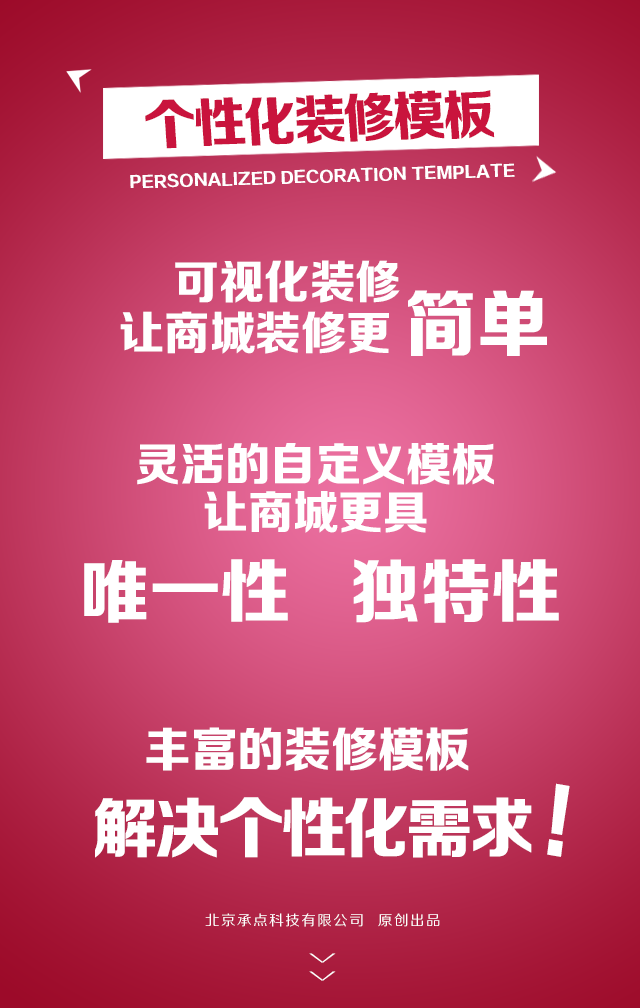
<style>
.page{position:relative;width:640px;height:1008px}
.page>*{position:absolute;margin:0}
.t1{font:53.7px "FZZDHJW--GB1-0";letter-spacing:-0.05em;color:#c9143d;text-transform:uppercase}
.t2{font:15.6px "FZZDHJW--GB1-0";letter-spacing:0.005em;color:#ffffff;text-transform:uppercase}
.t3{font:46.4px/51.5px "FZZDHJW--GB1-0";color:#ffffff;text-transform:uppercase}
.t4{font:72.8px "FZZDHJW--GB1-0";color:#ffffff;text-transform:uppercase}
.t5{font:46px/48px "FZZDHJW--GB1-0";color:#ffffff;text-transform:uppercase}
.t6{font:70.3px "FZZDHJW--GB1-0";color:#ffffff;text-transform:uppercase}
.t7{font:47.7px "FZZDHJW--GB1-0";color:#ffffff;text-transform:uppercase}
.t8{font:84.6px "FZZDHJW--GB1-0";letter-spacing:0.005em;color:#ffffff;text-transform:uppercase;scale:0.86 1}
.t9{font:66.1px "FZZDHJW--GB1-0";letter-spacing:-0.05em;color:#ffffff;text-transform:uppercase}
.t10{font:14.2px "FZZHJW--GB1-0";letter-spacing:0.1em;color:#ffffff;text-transform:uppercase}
.t11{font:36.8px "FZZXHJW--GB1-0";letter-spacing:0.5em;color:#ffffff;text-transform:uppercase;scale:0.44 1}
</style>
<div class="page">
<p class="t1" style="left:145px;top:90px;width:350px;height:59px;rotate:-2deg">个性化装修模板</p>
<p class="t2" style="left:130px;top:163px;width:385px;height:25px;rotate:-2deg">Personalized decoration template</p>
<p class="t3" style="left:120px;top:260px;width:280px;height:94px;text-align:center">可视化装修<br>让商城装修更</p>
<p class="t4" style="left:408px;top:290px;width:139px;height:66px">简单</p>
<p class="t5" style="left:137px;top:443px;width:357px;height:90px;text-align:center">灵活的自定义模板<br>让商城更具</p>
<p class="t6" style="left:84px;top:559px;width:475px;height:64px">唯一性   独特性</p>
<p class="t7" style="left:146px;top:727px;width:323px;height:44px">丰富的装修模板</p>
<p class="t8" style="left:547px;top:783px;width:23px;height:74px;rotate:10deg">!</p>
<p class="t9" style="left:95px;top:797px;width:437px;height:61px">解决个性化需求</p>
<p class="t10" style="left:205px;top:913px;width:235px;height:14px">北京承点科技有限公司  原创出品</p>
<p class="t11" style="left:309px;top:953px;width:27px;height:28px;rotate:90deg">&gt;&gt;</p>
</div>
